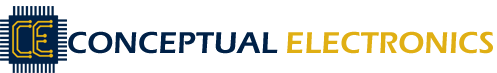
<style>
.page{position:relative;width:497px;height:73px;background:#ffffff}
.page>*{position:absolute;margin:0}
.t1{font:31.2px "ErasITC-Demi";color:#e0af14}
.t2{font:31.2px "ErasITC-Demi";color:#002147}
</style>
<div class="page">
<p class="t1" style="left:68px;top:31px;width:425px;height:23px"><span class="t2">CONCEPTUAL </span>ELECTRONICS</p>
</div>
